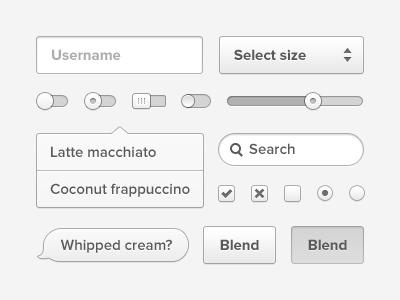
<style>
.page{position:relative;width:400px;height:300px;background:#f4f4f4}
.page>*{position:absolute;margin:0}
.t1{font:15px "ProximaNova-Bold";color:#acacac}
.t2{font:15px "ProximaNova-Bold";color:#4a4a4a}
.t3{font:15px "ProximaNova-Semibold";color:#4a4a4a}
</style>
<div class="page">
<p class="t1" style="left:52px;top:49px;width:69px;height:11px">Username</p>
<p class="t2" style="left:234px;top:49px;width:72px;height:11px">Select size</p>
<p class="t3" style="left:51px;top:146px;width:105px;height:11px">Latte macchiato</p>
<p class="t3" style="left:249px;top:143px;width:46px;height:11px">Search</p>
<p class="t3" style="left:50px;top:183px;width:140px;height:14px">Coconut frappuccino</p>
<p class="t3" style="left:60px;top:239px;width:112px;height:14px">Whipped cream?</p>
<p class="t2" style="left:220px;top:239px;width:39px;height:11px">Blend</p>
<p class="t2" style="left:308px;top:239px;width:39px;height:11px">Blend</p>
</div>
